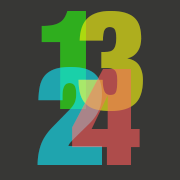
<style>
.page{position:relative;width:180px;height:180px;background:#373735}
.page>*{position:absolute;margin:0}
.t1{font:138px "HelveticaNeue-CondensedBlack"}
</style>
<div class="page">
<p class="t1" style="left:41px;top:11px;width:45px;height:98px">1</p>
<p class="t1" style="left:78px;top:11px;width:65px;height:100px">3</p>
<p class="t1" style="left:37px;top:67px;width:65px;height:98px">2</p>
<p class="t1" style="left:72px;top:69px;width:68px;height:96px">4</p>
</div>
